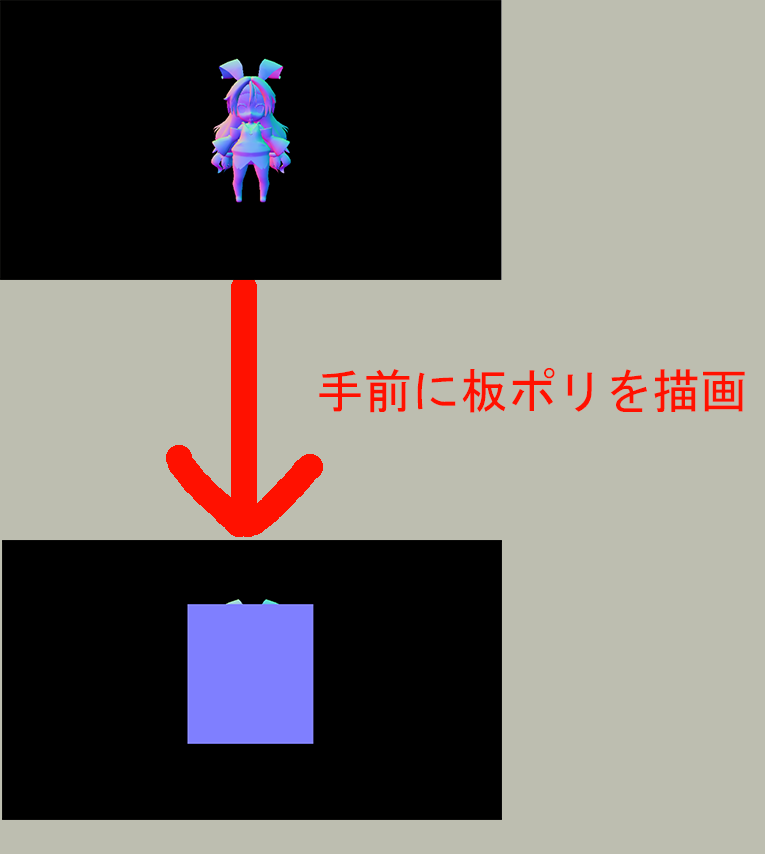
<style>
.page{position:relative;width:765px;height:854px;background:#bdbeb0}
.page>*{position:absolute;margin:0}
.t1{font:48px "MS-Gothic";color:#ff1100}
</style>
<div class="page">
<p class="t1" style="left:319px;top:368px;width:426px;height:45px">手前に板ポリを描画</p>
</div>
